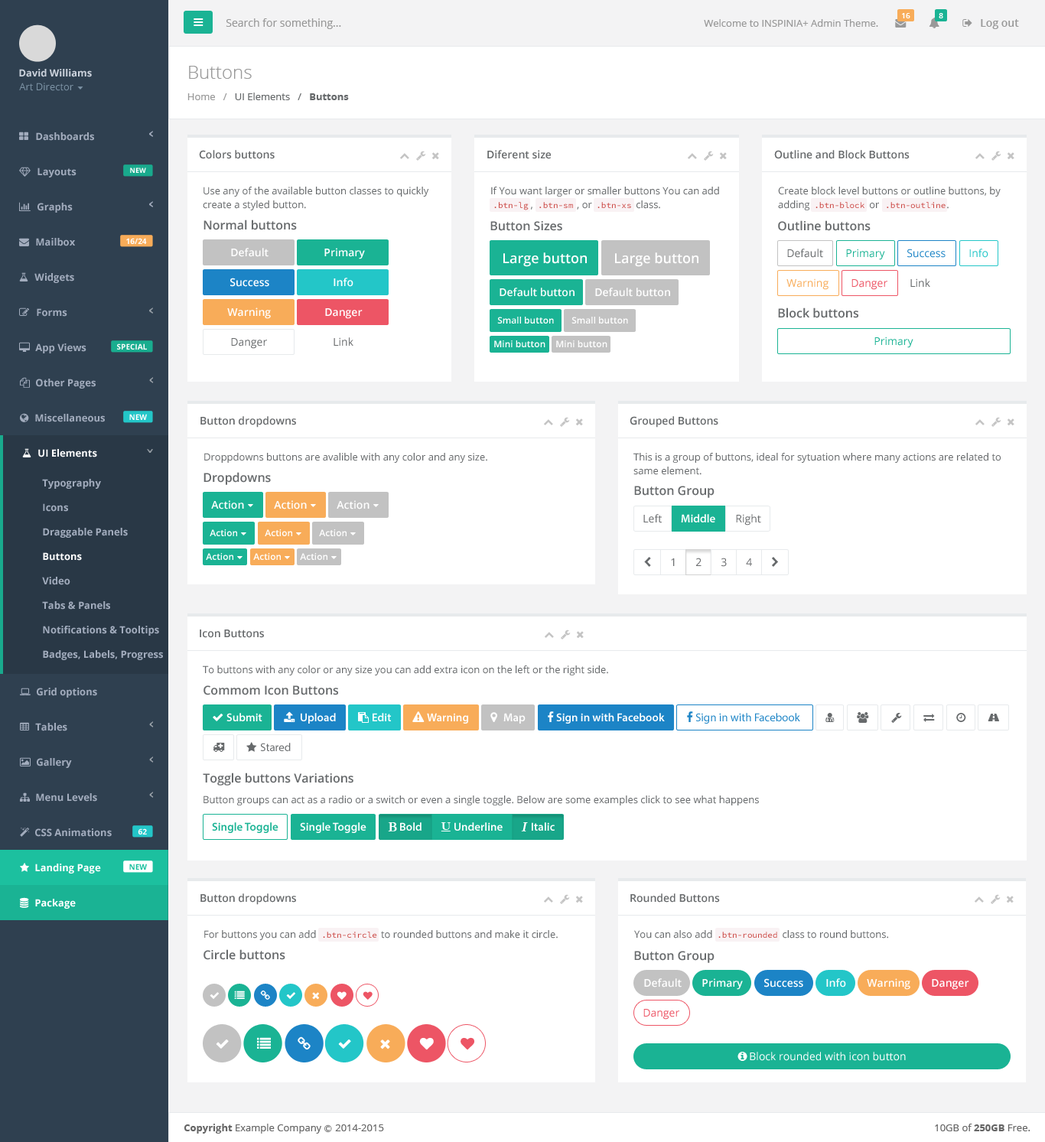
<style>
.page{position:relative;width:1045px;height:1142px;background:#ffffff}
.page>*{position:absolute;margin:0}
.t1{font:7.6px "OpenSans-Semibold";color:#ffffff}
.t2{font:10.7px "OpenSans";color:#999999}
.t3{font:9.9px "OpenSans";color:#999999}
.t4{font:10.7px "OpenSans-Semibold";color:#999999}
.t5{font:18.4px "OpenSans-Light";color:#999999}
.t6{font:9.9px "OpenSans-Bold";color:#cad1db}
.t7{font:9.9px "OpenSans";color:#7d93a5}
.t8{font:9.9px "OpenSans";color:#676a6c}
.t9{font:9.9px "OpenSans-Bold";color:#676a6c}
.t10{font:9.9px "OpenSans-Bold";color:#a2acbd}
.t11{font:10.7px "OpenSans-Semibold";color:#676a6c}
.t12{font:6.9px "OpenSans-Bold";color:#fefefe}
.t13{font:9.9px/13.8px "OpenSans";color:#676a6c}
.t14{font:8.4px "SourceCodePro-Regular";color:#ca4440}
.t15{font:12.2px "OpenSans-Semibold";color:#676a6c}
.t16{font:7.6px "OpenSans-Bold";color:#fefefe}
.t17{font:10.7px "OpenSans-Semibold";color:#ffffff}
.t18{font:13.8px "OpenSans-Semibold";color:#ffffff}
.t19{font:10.7px "OpenSans";color:#676a6c}
.t20{font:10.7px "OpenSans";color:#1ab394}
.t21{font:10.7px "OpenSans";color:#1c84c6}
.t22{font:10.7px "OpenSans";color:#23c6c8}
.t23{font:10.7px "OpenSans";color:#f8ac59}
.t24{font:10.7px "OpenSans";color:#ed5565}
.t25{font:9.2px "OpenSans-Semibold";color:#ffffff}
.t26{font:10.7px "OpenSans";color:#6a6c6e}
.t27{font:9.9px "OpenSans-Bold";color:#ffffff}
.t28{font:11.5px "MyriadPro-Semibold";color:#ffffff}
.t29{font:11.5px "MyriadPro-Regular";color:#1c84c6}
.t30{font:11.5px "MyriadPro-Regular";color:#676a6c}
.t31{font:11.5px "MyriadPro-Semibold";color:#1ab394}
.t32{font:7.6px "OpenSans-Bold";color:#1cc09f}
.t33{font:10.7px "OpenSans";color:#ffffff}
.t34{font:9.9px "OpenSans";color:#666666}
.t35{font:9.9px "OpenSans-Bold";color:#666666}
.t36{font:7.6px "Meiryo";color:#666666}
</style>
<div class="page">
<p class="t1" style="left:902px;top:13px;width:8px;height:5px">16</p>
<p class="t1" style="left:938px;top:13px;width:5px;height:5px">8</p>
<p class="t2" style="left:226px;top:18px;width:115px;height:11px">Search for something...</p>
<p class="t3" style="left:703px;top:19px;width:175px;height:8px">Welcome to INSPINIA+ Admin Theme.</p>
<p class="t4" style="left:980px;top:19px;width:39px;height:10px">Log out</p>
<p class="t5" style="left:189px;top:66px;width:63px;height:13px">Buttons</p>
<p class="t6" style="left:19px;top:69px;width:73px;height:8px">David Williams</p>
<p class="t7" style="left:19px;top:83px;width:54px;height:8px">Art Director</p>
<p class="t8" style="left:187px;top:93px;width:162px;height:7px"><span class="t3">Home   /   </span>UI Elements   / <span class="t9">  Buttons</span></p>
<p class="t10" style="left:36px;top:132px;width:58px;height:9px">Dashboards</p>
<p class="t11" style="left:199px;top:150px;width:76px;height:9px">Colors buttons</p>
<p class="t11" style="left:487px;top:150px;width:64px;height:9px">Diferent size</p>
<p class="t11" style="left:774px;top:150px;width:135px;height:9px">Outline and Block Buttons</p>
<p class="t10" style="left:37px;top:167px;width:39px;height:10px">Layouts</p>
<p class="t12" style="left:130px;top:167px;width:16px;height:6px">NEW</p>
<p class="t13" style="left:203px;top:187px;width:226px;height:23px">Use any of the available button classes to quickly<br>create a styled button.</p>
<p class="t13" style="left:491px;top:187px;width:228px;height:23px">If You want larger or smaller buttons You can add<br>                ,                 , or                 class.</p>
<p class="t13" style="left:778px;top:187px;width:222px;height:23px">Create block level buttons or outline buttons, by<br>adding                       or                          .</p>
<p class="t10" style="left:37px;top:203px;width:36px;height:10px">Graphs</p>
<p class="t14" style="left:494px;top:202px;width:34px;height:8px">.btn-lg</p>
<p class="t14" style="left:539px;top:202px;width:34px;height:6px">.btn-sm</p>
<p class="t14" style="left:597px;top:202px;width:34px;height:6px">.btn-xs</p>
<p class="t14" style="left:815px;top:202px;width:49px;height:6px">.btn-block</p>
<p class="t14" style="left:886px;top:202px;width:59px;height:6px">.btn-outline</p>
<p class="t15" style="left:203px;top:219px;width:94px;height:11px">Normal buttons</p>
<p class="t15" style="left:490px;top:221px;width:72px;height:10px">Button Sizes</p>
<p class="t15" style="left:778px;top:220px;width:92px;height:11px">Outline buttons</p>
<p class="t10" style="left:36px;top:238px;width:39px;height:8px">Mailbox</p>
<p class="t16" style="left:126px;top:238px;width:21px;height:6px">16/24</p>
<p class="t17" style="left:231px;top:248px;width:37px;height:9px">Default</p>
<p class="t17" style="left:324px;top:248px;width:41px;height:11px">Primary</p>
<p class="t18" style="left:503px;top:252px;width:83px;height:15px">Large button</p>
<p class="t18" style="left:615px;top:252px;width:83px;height:15px">Large button</p>
<p class="t19" style="left:787px;top:249px;width:36px;height:9px">Default</p>
<p class="t20" style="left:846px;top:249px;width:39px;height:11px">Primary</p>
<p class="t21" style="left:907px;top:249px;width:38px;height:9px">Success</p>
<p class="t22" style="left:969px;top:249px;width:19px;height:9px">Info</p>
<p class="t10" style="left:34px;top:273px;width:40px;height:10px">Widgets</p>
<p class="t17" style="left:230px;top:278px;width:39px;height:9px">Success</p>
<p class="t17" style="left:333px;top:278px;width:20px;height:9px">Info</p>
<p class="t23" style="left:786px;top:278px;width:42px;height:12px">Warning</p>
<p class="t24" style="left:851px;top:279px;width:36px;height:11px">Danger</p>
<p class="t19" style="left:910px;top:278px;width:20px;height:9px">Link</p>
<p class="t17" style="left:499px;top:288px;width:75px;height:9px">Default button</p>
<p class="t17" style="left:595px;top:288px;width:75px;height:9px">Default button</p>
<p class="t10" style="left:37px;top:308px;width:30px;height:9px">Forms</p>
<p class="t17" style="left:227px;top:307px;width:44px;height:12px">Warning</p>
<p class="t17" style="left:325px;top:308px;width:37px;height:11px">Danger</p>
<p class="t25" style="left:497px;top:317px;width:57px;height:6px">Small button</p>
<p class="t25" style="left:571px;top:317px;width:57px;height:6px">Small button</p>
<p class="t15" style="left:778px;top:307px;width:80px;height:11px">Block buttons</p>
<p class="t19" style="left:231px;top:338px;width:36px;height:11px">Danger</p>
<p class="t26" style="left:333px;top:337px;width:20px;height:9px">Link</p>
<p class="t25" style="left:494px;top:340px;width:51px;height:7px">Mini button</p>
<p class="t25" style="left:556px;top:340px;width:51px;height:7px">Mini button</p>
<p class="t20" style="left:874px;top:336px;width:39px;height:12px">Primary</p>
<p class="t10" style="left:35px;top:343px;width:51px;height:10px">App Views</p>
<p class="t16" style="left:117px;top:343px;width:30px;height:6px">SPECIAL</p>
<p class="t10" style="left:36px;top:379px;width:60px;height:9px">Other Pages</p>
<p class="t10" style="left:35px;top:414px;width:70px;height:8px">Miscellaneous</p>
<p class="t16" style="left:129px;top:414px;width:18px;height:6px">NEW</p>
<p class="t11" style="left:200px;top:416px;width:96px;height:11px">Button dropdowns</p>
<p class="t11" style="left:629px;top:416px;width:89px;height:11px">Grouped Buttons</p>
<p class="t27" style="left:38px;top:449px;width:59px;height:8px">UI Elements</p>
<p class="t8" style="left:204px;top:453px;width:283px;height:10px">Droppdowns buttons are avalible with any color and any size.</p>
<p class="t13" style="left:633px;top:453px;width:367px;height:22px">This is a group of buttons, ideal for sytuation where many actions are related to<br>same element.</p>
<p class="t15" style="left:203px;top:472px;width:68px;height:13px">Dropdowns</p>
<p class="t10" style="left:42px;top:479px;width:59px;height:10px">Typography</p>
<p class="t15" style="left:634px;top:486px;width:80px;height:12px">Button Group</p>
<p class="t10" style="left:43px;top:503px;width:25px;height:9px">Icons</p>
<p class="t17" style="left:211px;top:500px;width:33px;height:9px">Action</p>
<p class="t17" style="left:274px;top:500px;width:33px;height:9px">Action</p>
<p class="t17" style="left:336px;top:500px;width:33px;height:9px">Action</p>
<p class="t26" style="left:643px;top:514px;width:18px;height:9px">Left</p>
<p class="t28" style="left:681px;top:514px;width:34px;height:8px">Middle</p>
<p class="t26" style="left:736px;top:514px;width:25px;height:11px">Right</p>
<p class="t10" style="left:43px;top:528px;width:85px;height:10px">Draggable Panels</p>
<p class="t25" style="left:210px;top:529px;width:27px;height:7px">Action</p>
<p class="t25" style="left:265px;top:529px;width:27px;height:7px">Action</p>
<p class="t25" style="left:319px;top:529px;width:27px;height:7px">Action</p>
<p class="t27" style="left:43px;top:552px;width:39px;height:8px">Buttons</p>
<p class="t25" style="left:206px;top:553px;width:27px;height:7px">Action</p>
<p class="t25" style="left:253px;top:553px;width:28px;height:7px">Action</p>
<p class="t25" style="left:300px;top:553px;width:27px;height:7px">Action</p>
<p class="t26" style="left:696px;top:557px;width:5px;height:9px">2</p>
<p class="t26" style="left:721px;top:557px;width:5px;height:10px">3</p>
<p class="t26" style="left:671px;top:558px;width:3px;height:8px">1</p>
<p class="t26" style="left:746px;top:558px;width:6px;height:8px">4</p>
<p class="t10" style="left:42px;top:577px;width:28px;height:8px">Video</p>
<p class="t10" style="left:42px;top:601px;width:68px;height:8px">Tabs &amp; Panels</p>
<p class="t10" style="left:43px;top:625px;width:116px;height:10px">Notifications &amp; Tooltips</p>
<p class="t11" style="left:200px;top:629px;width:64px;height:9px">Icon Buttons</p>
<p class="t10" style="left:43px;top:650px;width:120px;height:10px">Badges, Labels, Progress</p>
<p class="t8" style="left:203px;top:665px;width:405px;height:10px">To buttons with any color or any size you can add extra icon on the left or the right side.</p>
<p class="t10" style="left:37px;top:687px;width:60px;height:10px">Grid options</p>
<p class="t15" style="left:203px;top:685px;width:135px;height:10px">Commom Icon Buttons</p>
<p class="t28" style="left:226px;top:713px;width:36px;height:8px">Submit</p>
<p class="t28" style="left:301px;top:713px;width:35px;height:10px">Upload</p>
<p class="t28" style="left:372px;top:713px;width:19px;height:8px">Edit</p>
<p class="t28" style="left:427px;top:713px;width:41px;height:10px">Warning</p>
<p class="t28" style="left:503px;top:713px;width:22px;height:10px">Map</p>
<p class="t28" style="left:556px;top:713px;width:108px;height:10px">Sign in with Facebook</p>
<p class="t29" style="left:695px;top:713px;width:105px;height:10px">Sign in with Facebook</p>
<p class="t10" style="left:35px;top:723px;width:32px;height:8px">Tables</p>
<p class="t30" style="left:260px;top:742px;width:31px;height:9px">Stared</p>
<p class="t10" style="left:37px;top:758px;width:35px;height:10px">Gallery</p>
<p class="t15" style="left:203px;top:772px;width:150px;height:13px">Toggle buttons Variations</p>
<p class="t10" style="left:36px;top:793px;width:61px;height:8px">Menu Levels</p>
<p class="t8" style="left:203px;top:795px;width:556px;height:10px">Button groups can act as a radio or a switch or even a single toggle. Below are some examples click to see what happens</p>
<p class="t31" style="left:212px;top:822px;width:66px;height:11px">Single Toggle</p>
<p class="t28" style="left:300px;top:822px;width:66px;height:11px">Single Toggle</p>
<p class="t28" style="left:400px;top:822px;width:21px;height:8px">Bold</p>
<p class="t28" style="left:454px;top:822px;width:48px;height:8px">Underline</p>
<p class="t28" style="left:531px;top:822px;width:23px;height:8px">Italic</p>
<p class="t10" style="left:35px;top:828px;width:77px;height:9px">CSS Animations</p>
<p class="t16" style="left:138px;top:828px;width:9px;height:6px">62</p>
<p class="t27" style="left:35px;top:863px;width:66px;height:10px">Landing Page</p>
<p class="t32" style="left:129px;top:863px;width:18px;height:6px">NEW</p>
<p class="t11" style="left:200px;top:893px;width:96px;height:12px">Button dropdowns</p>
<p class="t11" style="left:630px;top:893px;width:90px;height:9px">Rounded Buttons</p>
<p class="t27" style="left:35px;top:898px;width:41px;height:10px">Package</p>
<p class="t8" style="left:204px;top:930px;width:353px;height:10px">For buttons you can add                         to rounded buttons and make it circle.</p>
<p class="t8" style="left:634px;top:930px;width:254px;height:8px">You can also add                           class to round buttons.</p>
<p class="t14" style="left:323px;top:931px;width:54px;height:6px">.btn-circle</p>
<p class="t14" style="left:718px;top:931px;width:59px;height:6px">.btn-rounded</p>
<p class="t15" style="left:203px;top:949px;width:82px;height:11px">Circle buttons</p>
<p class="t15" style="left:634px;top:950px;width:80px;height:13px">Button Group</p>
<p class="t17" style="left:644px;top:978px;width:37px;height:9px">Default</p>
<p class="t17" style="left:702px;top:978px;width:40px;height:11px">Primary</p>
<p class="t17" style="left:764px;top:978px;width:39px;height:9px">Success</p>
<p class="t17" style="left:826px;top:978px;width:20px;height:9px">Info</p>
<p class="t17" style="left:866px;top:978px;width:44px;height:11px">Warning</p>
<p class="t17" style="left:931px;top:979px;width:38px;height:10px">Danger</p>
<p class="t24" style="left:643px;top:1009px;width:36px;height:10px">Danger</p>
<p class="t33" style="left:749px;top:1051px;width:156px;height:10px">Block rounded with icon button</p>
<p class="t34" style="left:184px;top:1123px;width:200px;height:10px"><span class="t35">Copyright</span> Example Company <span class="t36">Ⓒ </span>2014-2015</p>
<p class="t34" style="left:934px;top:1123px;width:96px;height:8px">10GB of <span class="t35">250GB</span> Free.</p>
</div>
